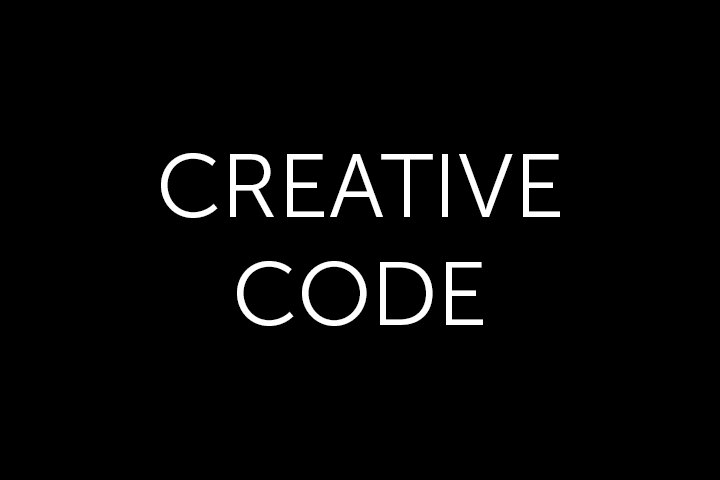
<style>
.page{position:relative;width:720px;height:480px;background:#000000}
.page>*{position:absolute;margin:0}
.t1{font:90px "MuseoSans-300";color:#ffffff;text-transform:uppercase}
</style>
<div class="page">
<p class="t1" style="left:161px;top:153px;width:399px;height:173px;text-align:center">creative<br>code</p>
</div>
